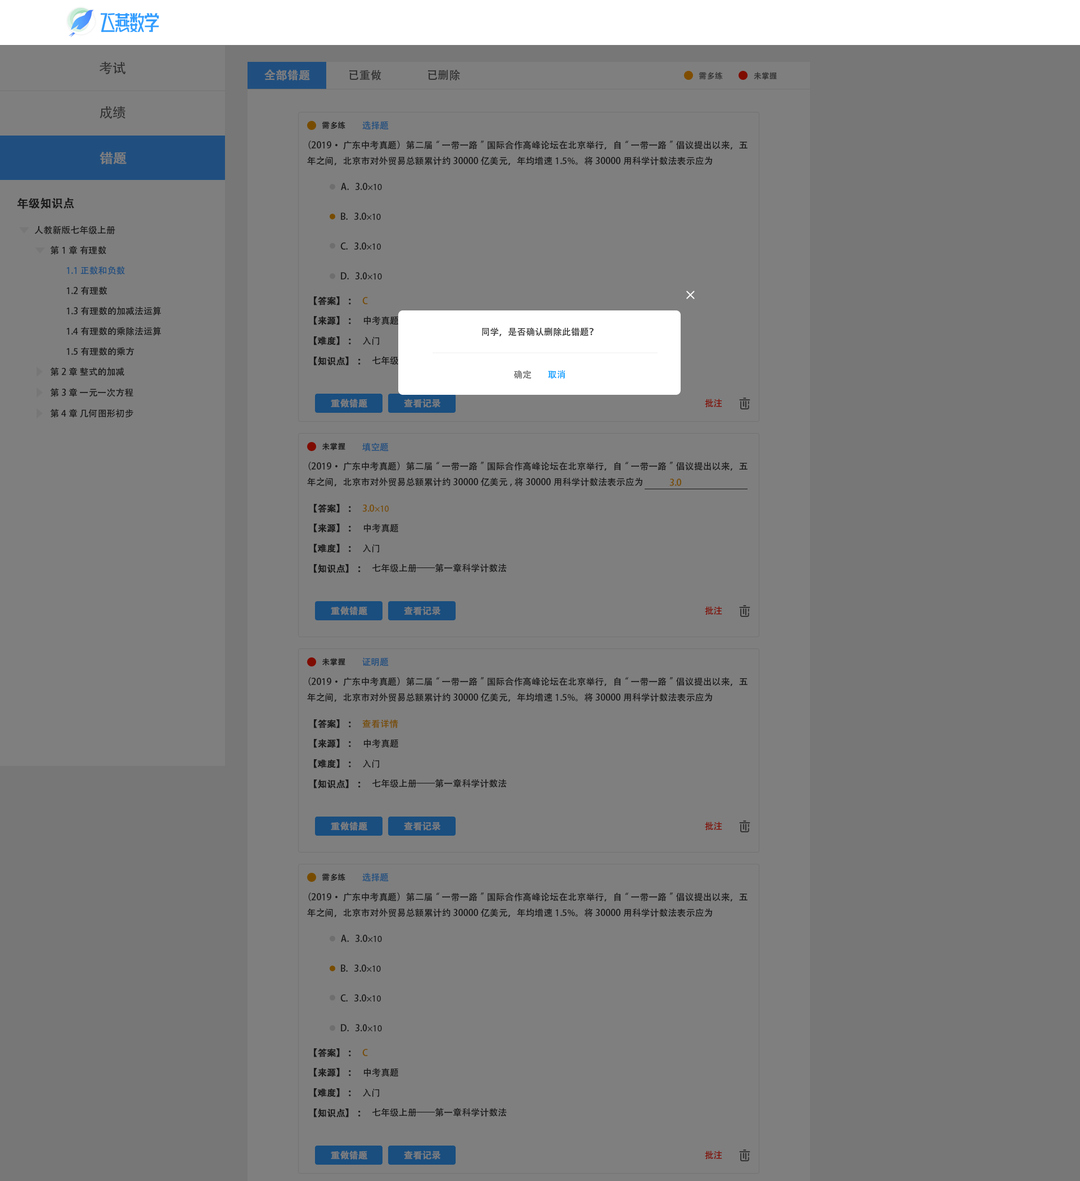
<style>
.page{position:relative;width:1080px;height:1181px;background:#7f7f7f}
.page>*{position:absolute;margin:0}
.t1{font:13.5px "AdobeHeitiStd-Regular";color:#333333}
.t2{font:11.2px "AdobeHeitiStd-Regular";color:#7f7f7f;font-weight:bold}
.t3{font:11.2px "AdobeHeitiStd-Regular";color:#333333}
.t4{font:7.9px "AdobeHeitiStd-Regular";color:#333333}
.t5{font:7.9px "AdobeHeitiStd-Regular";color:#191919}
.t6{font:9px "AdobeHeitiStd-Regular";color:#204f7f}
.t7{font:9px "AdobeHeitiStd-Regular";color:#191919}
.t8{font:13.5px "AdobeHeitiStd-Regular";color:#7f7f7f;font-weight:bold}
.t9{font:9px "MyriadPro-Regular";color:#191919}
.t10{font:11.2px "AdobeHeitiStd-Regular";color:#191919;font-weight:bold}
.t11{font:9px "AdobeHeitiStd-Regular";color:#191919;font-weight:bold}
.t12{font:9px "AdobeHeitiStd-Regular";color:#774c00}
.t13{font:9px "AdobeHeitiStd-Regular";color:#333333}
.t14{font:9px "AdobeHeitiStd-Regular";color:#666666}
.t15{font:9px "AdobeHeitiStd-Regular";color:#049eff}
.t16{font:9px "AdobeHeitiStd-Regular";color:#7f7f7f;font-weight:bold}
.t17{font:9px "AdobeHeitiStd-Regular";color:#7f0c00}
.t18{font:9px "MyriadPro-Regular";color:#774c00}
</style>
<div class="page">
<p class="t1" style="left:99px;top:61px;width:27px;height:13px">考试</p>
<p class="t2" style="left:264px;top:69px;width:46px;height:12px">全部错题</p>
<p class="t3" style="left:349px;top:70px;width:32px;height:10px">已重做</p>
<p class="t3" style="left:428px;top:70px;width:32px;height:10px">已删除</p>
<p class="t4" style="left:699px;top:72px;width:24px;height:8px">需多练</p>
<p class="t4" style="left:754px;top:72px;width:23px;height:8px">未掌握</p>
<p class="t1" style="left:100px;top:106px;width:25px;height:13px">成绩</p>
<p class="t5" style="left:322px;top:122px;width:23px;height:7px">需多练</p>
<p class="t6" style="left:362px;top:121px;width:27px;height:9px">选择题</p>
<p class="t7" style="left:307px;top:141px;width:441px;height:24px">（2019·广东中考真题）第二届“一带一路”国际合作高峰论坛在北京举行，自“一带一路”倡议提出以来，五年之间，北京市对外贸易总额累计约30000亿美元，年均增速1.5%。将30000用科学计数法表示应为</p>
<p class="t8" style="left:100px;top:152px;width:27px;height:12px">错题</p>
<p class="t7" style="left:341px;top:183px;width:41px;height:7px">A.   3.0<span class="t9">×10</span></p>
<p class="t10" style="left:17px;top:197px;width:57px;height:12px">年级知识点</p>
<p class="t7" style="left:341px;top:213px;width:40px;height:7px">B.   3.0<span class="t9">×10</span></p>
<p class="t7" style="left:34px;top:226px;width:81px;height:9px">人教新版七年级上册</p>
<p class="t7" style="left:50px;top:246px;width:56px;height:9px">第1章 有理数</p>
<p class="t7" style="left:340px;top:242px;width:41px;height:8px">C.   3.0<span class="t9">×10</span></p>
<p class="t6" style="left:66px;top:266px;width:59px;height:9px">1.1 正数和负数</p>
<p class="t7" style="left:341px;top:272px;width:41px;height:8px">D.   3.0<span class="t9">×10</span></p>
<p class="t7" style="left:66px;top:286px;width:41px;height:9px">1.2有理数</p>
<p class="t11" style="left:314px;top:296px;width:37px;height:9px">【答案】：</p>
<p class="t12" style="left:362px;top:297px;width:6px;height:7px">C</p>
<p class="t7" style="left:66px;top:307px;width:95px;height:9px">1.3有理数的加减法运算</p>
<p class="t11" style="left:314px;top:316px;width:37px;height:9px">【来源】：</p>
<p class="t7" style="left:363px;top:316px;width:35px;height:9px">中考真题</p>
<p class="t7" style="left:66px;top:327px;width:95px;height:9px">1.4有理数的乘除法运算</p>
<p class="t13" style="left:482px;top:327px;width:112px;height:9px">同学，是否确认删除此错题？</p>
<p class="t11" style="left:314px;top:336px;width:37px;height:9px">【难度】：</p>
<p class="t7" style="left:363px;top:337px;width:16px;height:8px">入门</p>
<p class="t7" style="left:66px;top:347px;width:68px;height:9px">1.5有理数的乘方</p>
<p class="t11" style="left:314px;top:357px;width:47px;height:9px">【知识点】：</p>
<p class="t7" style="left:50px;top:367px;width:74px;height:9px">第2章 整式的加减</p>
<p class="t14" style="left:514px;top:370px;width:18px;height:9px">确定</p>
<p class="t15" style="left:548px;top:370px;width:17px;height:9px">取消</p>
<p class="t7" style="left:50px;top:388px;width:83px;height:9px">第3章 一元一次方程</p>
<p class="t16" style="left:331px;top:399px;width:37px;height:9px">重做错题</p>
<p class="t16" style="left:404px;top:399px;width:36px;height:9px">查看记录</p>
<p class="t17" style="left:705px;top:399px;width:17px;height:9px">批注</p>
<p class="t7" style="left:50px;top:409px;width:83px;height:9px">第4章 几何图形初步</p>
<p class="t5" style="left:322px;top:443px;width:23px;height:8px">未掌握</p>
<p class="t6" style="left:362px;top:443px;width:27px;height:9px">填空题</p>
<p class="t7" style="left:307px;top:462px;width:441px;height:25px">（2019·广东中考真题）第二届“一带一路”国际合作高峰论坛在北京举行，自“一带一路”倡议提出以来，五年之间，北京市对外贸易总额累计约30000亿美元,将30000用科学计数法表示应为</p>
<p class="t12" style="left:669px;top:479px;width:13px;height:7px">3.0</p>
<p class="t11" style="left:314px;top:504px;width:37px;height:9px">【答案】：</p>
<p class="t12" style="left:362px;top:505px;width:27px;height:7px">3.0<span class="t18">×10</span></p>
<p class="t11" style="left:314px;top:524px;width:37px;height:9px">【来源】：</p>
<p class="t7" style="left:363px;top:524px;width:35px;height:9px">中考真题</p>
<p class="t11" style="left:314px;top:544px;width:37px;height:9px">【难度】：</p>
<p class="t7" style="left:363px;top:544px;width:16px;height:9px">入门</p>
<p class="t11" style="left:314px;top:564px;width:47px;height:9px">【知识点】：</p>
<p class="t7" style="left:372px;top:564px;width:135px;height:9px">七年级上册——第一章科学计数法</p>
<p class="t16" style="left:331px;top:606px;width:37px;height:9px">重做错题</p>
<p class="t16" style="left:404px;top:606px;width:36px;height:9px">查看记录</p>
<p class="t17" style="left:705px;top:606px;width:17px;height:9px">批注</p>
<p class="t5" style="left:322px;top:658px;width:23px;height:8px">未掌握</p>
<p class="t6" style="left:362px;top:658px;width:27px;height:9px">证明题</p>
<p class="t7" style="left:307px;top:677px;width:441px;height:25px">（2019·广东中考真题）第二届“一带一路”国际合作高峰论坛在北京举行，自“一带一路”倡议提出以来，五年之间，北京市对外贸易总额累计约30000亿美元，年均增速1.5%。将30000用科学计数法表示应为</p>
<p class="t11" style="left:314px;top:719px;width:37px;height:9px">【答案】：</p>
<p class="t12" style="left:362px;top:719px;width:36px;height:9px">查看详情</p>
<p class="t11" style="left:314px;top:739px;width:37px;height:9px">【来源】：</p>
<p class="t7" style="left:363px;top:739px;width:35px;height:9px">中考真题</p>
<p class="t11" style="left:314px;top:759px;width:37px;height:9px">【难度】：</p>
<p class="t7" style="left:363px;top:760px;width:16px;height:8px">入门</p>
<p class="t11" style="left:314px;top:780px;width:47px;height:9px">【知识点】：</p>
<p class="t7" style="left:372px;top:779px;width:135px;height:9px">七年级上册——第一章科学计数法</p>
<p class="t16" style="left:331px;top:822px;width:37px;height:9px">重做错题</p>
<p class="t16" style="left:404px;top:822px;width:36px;height:9px">查看记录</p>
<p class="t17" style="left:705px;top:822px;width:17px;height:9px">批注</p>
<p class="t5" style="left:322px;top:874px;width:23px;height:7px">需多练</p>
<p class="t6" style="left:362px;top:873px;width:27px;height:9px">选择题</p>
<p class="t7" style="left:307px;top:893px;width:441px;height:24px">（2019·广东中考真题）第二届“一带一路”国际合作高峰论坛在北京举行，自“一带一路”倡议提出以来，五年之间，北京市对外贸易总额累计约30000亿美元，年均增速1.5%。将30000用科学计数法表示应为</p>
<p class="t7" style="left:341px;top:935px;width:41px;height:7px">A.   3.0<span class="t9">×10</span></p>
<p class="t7" style="left:341px;top:965px;width:40px;height:7px">B.   3.0<span class="t9">×10</span></p>
<p class="t7" style="left:340px;top:994px;width:41px;height:8px">C.   3.0<span class="t9">×10</span></p>
<p class="t7" style="left:341px;top:1024px;width:41px;height:8px">D.   3.0<span class="t9">×10</span></p>
<p class="t11" style="left:314px;top:1048px;width:37px;height:10px">【答案】：</p>
<p class="t12" style="left:362px;top:1049px;width:6px;height:7px">C</p>
<p class="t11" style="left:314px;top:1068px;width:37px;height:9px">【来源】：</p>
<p class="t7" style="left:363px;top:1068px;width:35px;height:9px">中考真题</p>
<p class="t11" style="left:314px;top:1088px;width:37px;height:9px">【难度】：</p>
<p class="t7" style="left:363px;top:1089px;width:16px;height:8px">入门</p>
<p class="t11" style="left:314px;top:1109px;width:47px;height:9px">【知识点】：</p>
<p class="t7" style="left:372px;top:1108px;width:135px;height:9px">七年级上册——第一章科学计数法</p>
<p class="t16" style="left:331px;top:1151px;width:37px;height:9px">重做错题</p>
<p class="t16" style="left:404px;top:1151px;width:36px;height:9px">查看记录</p>
<p class="t17" style="left:705px;top:1151px;width:17px;height:9px">批注</p>
</div>
